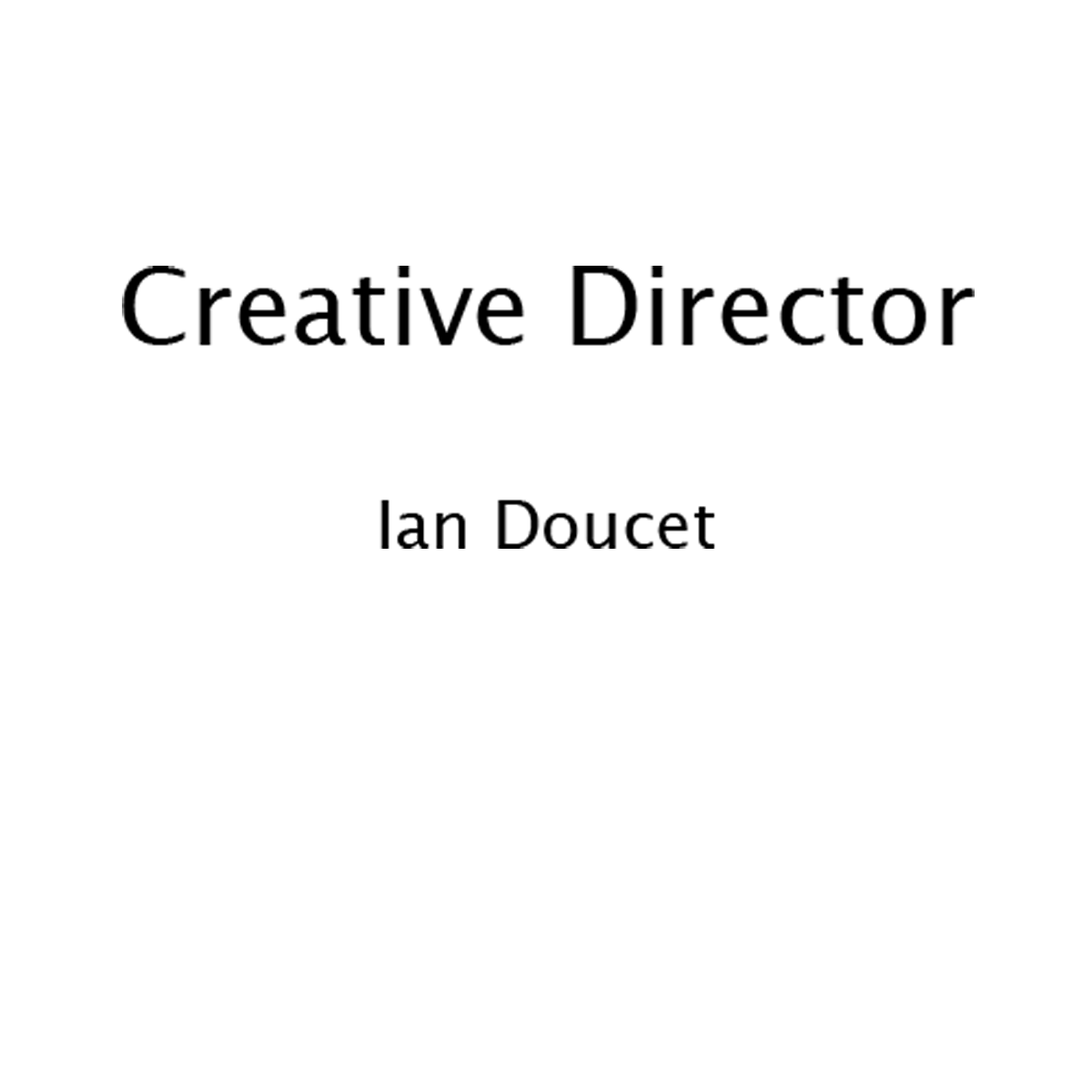
<style>
.page{position:relative;width:1092px;height:1092px;background:#ffffff}
.page>*{position:absolute;margin:0}
.t1{font:104.8px "LucidaGrande";color:#000000}
.t2{font:65.5px "LucidaGrande";color:#9b9b9b}
.t3{font:65.5px "LucidaGrande";color:#000000}
</style>
<div class="page">
<p class="t1" style="left:122px;top:266px;width:853px;height:283px;text-align:center"><span class="t2"><br><br><br></span>Creative Director<br><br><span class="t3">Ian Doucet</span></p>
</div>
